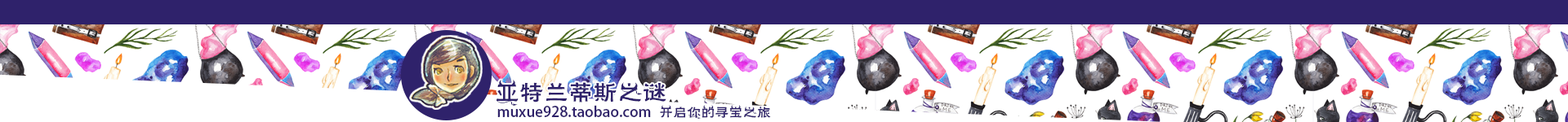
<style>
.page{position:relative;width:1568px;height:122px;background:#ffffff}
.page>*{position:absolute;margin:0}
.t1{font:24.5px "FZHLJW--GB1-0";color:#2f226b}
.t2{font:14.7px "AdobeHeitiStd-Regular";color:#2f226b}
.t3{font:13.9px "FZHLJW--GB1-0";color:#2f226b}
</style>
<div class="page">
<p class="t1" style="left:497px;top:80px;width:169px;height:27px">亚特兰蒂斯之谜</p>
<p class="t2" style="left:497px;top:105px;width:154px;height:13px">muxue928.taobao.com</p>
<p class="t3" style="left:660px;top:105px;width:111px;height:14px">开启你的寻宝之旅</p>
</div>
